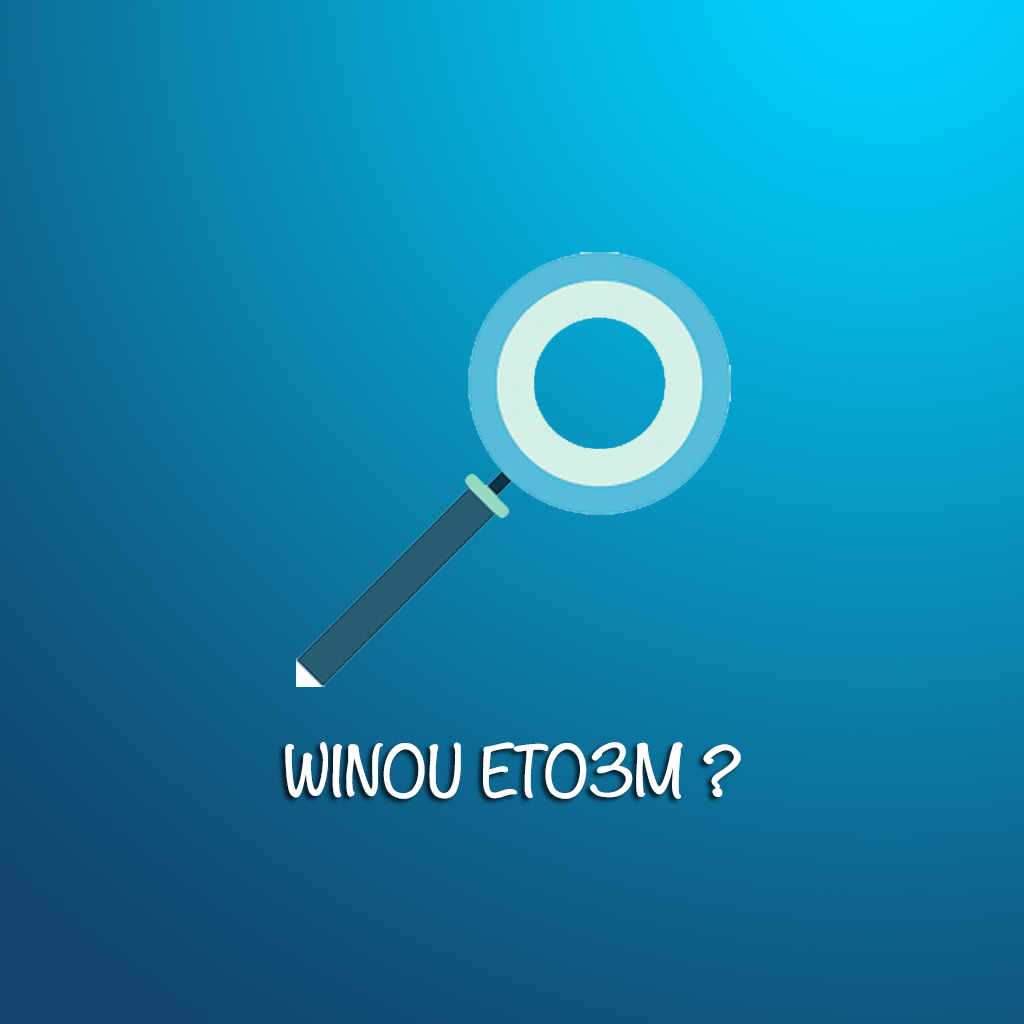
<style>
.page{position:relative;width:1024px;height:1024px}
.page>*{position:absolute;margin:0}
.t1{font:60.8px "Noteworthy-Light";color:#ffffff;font-weight:bold}
</style>
<div class="page">
<p class="t1" style="left:285px;top:741px;width:456px;height:58px">WINOU ETO3M ?</p>
</div>
